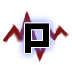
<style>
.page{position:relative;width:72px;height:72px;background:#ffffff}
.page>*{position:absolute;margin:0}
.t1{font:26.2px "HappyKiller";color:#000000}
</style>
<div class="page">
<p class="t1" style="left:25px;top:23px;width:24px;height:30px">P</p>
</div>
